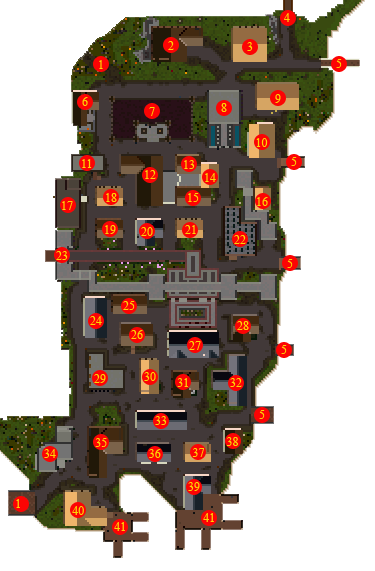
<style>
.page{position:relative;width:375px;height:571px;background:#ffffff}
.page>*{position:absolute;margin:0}
.t1{font:12px "TimesNewRomanPSMT";color:#fcd604}
</style>
<div class="page">
<p class="t1" style="left:284px;top:13px;width:6px;height:9px">4</p>
<p class="t1" style="left:168px;top:41px;width:6px;height:9px">2</p>
<p class="t1" style="left:247px;top:42px;width:6px;height:9px">3</p>
<p class="t1" style="left:99px;top:60px;width:4px;height:9px">1</p>
<p class="t1" style="left:336px;top:59px;width:6px;height:9px">5</p>
<p class="t1" style="left:82px;top:97px;width:6px;height:9px">6</p>
<p class="t1" style="left:275px;top:94px;width:6px;height:9px">9</p>
<p class="t1" style="left:149px;top:107px;width:6px;height:9px">7</p>
<p class="t1" style="left:221px;top:103px;width:6px;height:9px">8</p>
<p class="t1" style="left:256px;top:138px;width:12px;height:9px">10</p>
<p class="t1" style="left:82px;top:159px;width:10px;height:9px">11</p>
<p class="t1" style="left:184px;top:160px;width:11px;height:9px">13</p>
<p class="t1" style="left:291px;top:157px;width:6px;height:9px">5</p>
<p class="t1" style="left:145px;top:170px;width:11px;height:9px">12</p>
<p class="t1" style="left:205px;top:173px;width:11px;height:9px">14</p>
<p class="t1" style="left:106px;top:193px;width:11px;height:9px">18</p>
<p class="t1" style="left:188px;top:193px;width:11px;height:9px">15</p>
<p class="t1" style="left:257px;top:197px;width:11px;height:9px">16</p>
<p class="t1" style="left:62px;top:201px;width:11px;height:9px">17</p>
<p class="t1" style="left:105px;top:225px;width:11px;height:9px">19</p>
<p class="t1" style="left:141px;top:227px;width:12px;height:9px">20</p>
<p class="t1" style="left:185px;top:225px;width:11px;height:9px">21</p>
<p class="t1" style="left:234px;top:235px;width:12px;height:9px">22</p>
<p class="t1" style="left:56px;top:251px;width:12px;height:9px">23</p>
<p class="t1" style="left:287px;top:259px;width:6px;height:9px">5</p>
<p class="t1" style="left:123px;top:301px;width:12px;height:9px">25</p>
<p class="t1" style="left:90px;top:316px;width:12px;height:9px">24</p>
<p class="t1" style="left:237px;top:321px;width:12px;height:9px">28</p>
<p class="t1" style="left:131px;top:330px;width:12px;height:9px">26</p>
<p class="t1" style="left:189px;top:341px;width:12px;height:9px">27</p>
<p class="t1" style="left:281px;top:345px;width:6px;height:9px">5</p>
<p class="t1" style="left:94px;top:374px;width:12px;height:9px">29</p>
<p class="t1" style="left:144px;top:372px;width:12px;height:9px">30</p>
<p class="t1" style="left:177px;top:378px;width:11px;height:9px">31</p>
<p class="t1" style="left:230px;top:378px;width:12px;height:9px">32</p>
<p class="t1" style="left:259px;top:410px;width:6px;height:9px">5</p>
<p class="t1" style="left:155px;top:416px;width:12px;height:9px">33</p>
<p class="t1" style="left:95px;top:438px;width:12px;height:9px">35</p>
<p class="t1" style="left:226px;top:437px;width:12px;height:9px">38</p>
<p class="t1" style="left:44px;top:449px;width:12px;height:9px">34</p>
<p class="t1" style="left:149px;top:449px;width:12px;height:9px">36</p>
<p class="t1" style="left:192px;top:448px;width:12px;height:9px">37</p>
<p class="t1" style="left:188px;top:482px;width:12px;height:9px">39</p>
<p class="t1" style="left:16px;top:499px;width:4px;height:9px">1</p>
<p class="t1" style="left:72px;top:506px;width:12px;height:9px">40</p>
<p class="t1" style="left:203px;top:513px;width:11px;height:9px">41</p>
<p class="t1" style="left:114px;top:522px;width:11px;height:9px">41</p>
</div>
